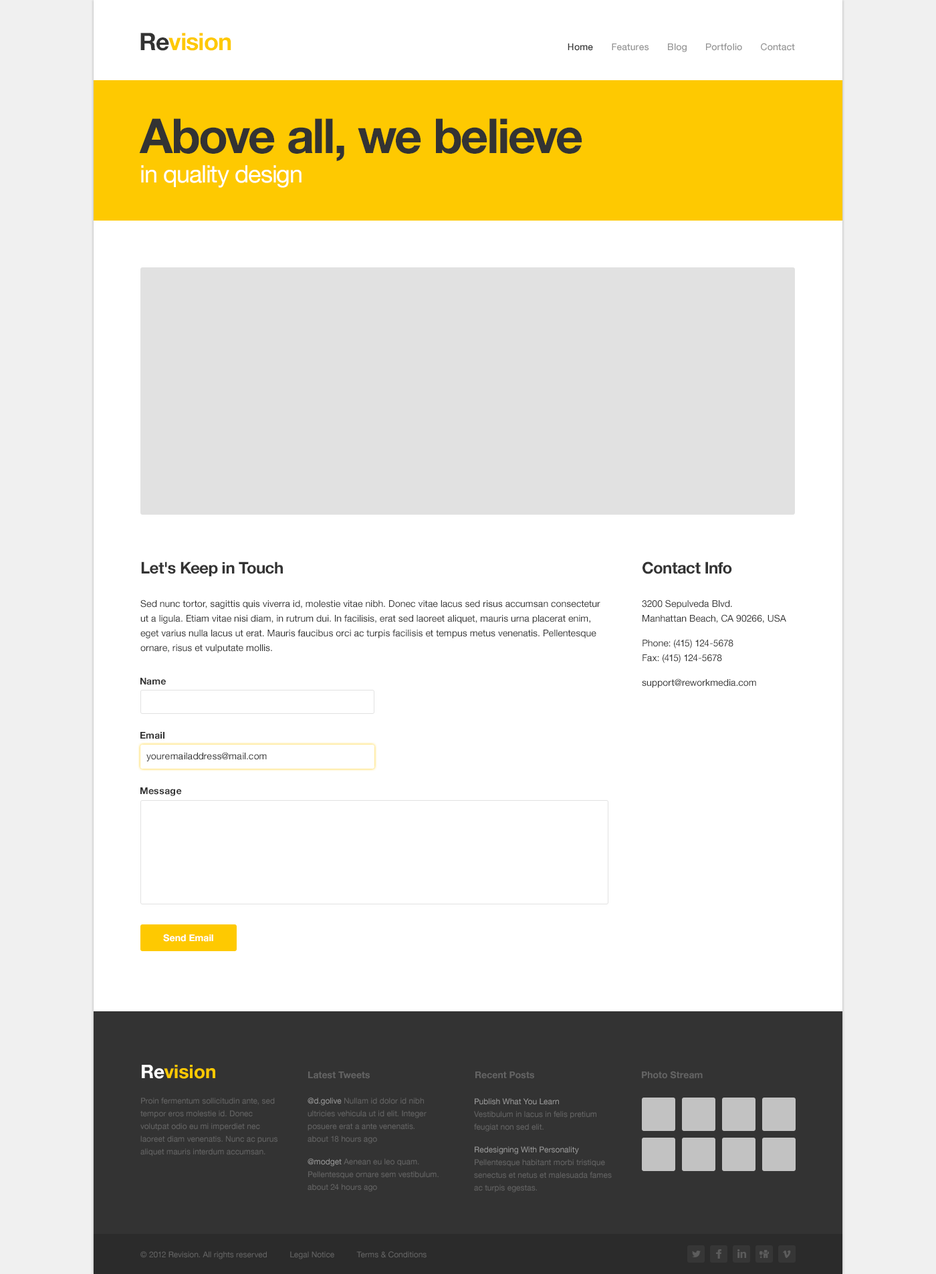
<style>
.page{position:relative;width:936px;height:1274px;background:#ffffff}
.page>*{position:absolute;margin:0}
.t1{font:24.1px "HelveticaNeue-Bold";letter-spacing:-0.025em;color:#fec901}
.t2{font:24.1px "HelveticaNeue-Bold";letter-spacing:-0.025em;color:#333333}
.t3{font:9.4px "HelveticaNeue-Medium";color:#959595}
.t4{font:9.4px "HelveticaNeue-Medium";color:#333333}
.t5{font:48.1px "HelveticaNeue-Bold";letter-spacing:-0.025em;color:#333333}
.t6{font:24.1px "HelveticaNeue";letter-spacing:-0.025em;color:#ffffff}
.t7{font:16px "HelveticaNeue-Bold";letter-spacing:-0.025em;color:#333333}
.t8{font:9.4px/14.7px "HelveticaNeue";color:#333333}
.t9{font:9.4px "HelveticaNeue-Bold";color:#333333}
.t10{font:9.4px "HelveticaNeue";color:#333333}
.t11{font:9.4px "HelveticaNeue-Bold";color:#ffffff}
.t12{font:18.7px "HelveticaNeue-Bold";color:#fec901}
.t13{font:18.7px "HelveticaNeue-Bold";color:#ffffff}
.t14{font:9.4px "HelveticaNeue-Bold";color:#636363}
.t15{font:8px/12.7px "HelveticaNeue";color:#636363}
.t16{font:8px/12.7px "HelveticaNeue";color:#959595}
.t17{font:8px "HelveticaNeue";color:#636363}
</style>
<div class="page">
<p class="t1" style="left:140px;top:33px;width:91px;height:18px"><span class="t2">Re</span>vision</p>
<p class="t3" style="left:568px;top:43px;width:227px;height:9px"><span class="t4">Home       </span>Features       Blog       Portfolio       Contact</p>
<p class="t5" style="left:139px;top:118px;width:443px;height:70px">Above all, we believe<br><span class="t6">in quality design</span></p>
<p class="t7" style="left:141px;top:562px;width:142px;height:15px">Let's Keep in Touch</p>
<p class="t7" style="left:642px;top:562px;width:90px;height:12px">Contact Info</p>
<p class="t8" style="left:140px;top:600px;width:460px;height:53px">Sed nunc tortor, sagittis quis viverra id, molestie vitae nibh. Donec vitae lacus sed risus accumsan consectetur ut a ligula. Etiam vitae nisi diam, in rutrum dui. In facilisis, erat sed laoreet aliquet, mauris urna placerat enim, eget varius nulla lacus ut erat. Mauris faucibus orci ac turpis facilisis et tempus metus venenatis. Pellentesque ornare, risus et vulputate mollis.</p>
<p class="t8" style="left:642px;top:600px;width:144px;height:88px">3200 Sepulveda Blvd.<br>Manhattan Beach, CA 90266, USA<br>Phone: (415) 124-5678<br>Fax: (415) 124-5678<br>support@reworkmedia.com</p>
<p class="t9" style="left:140px;top:678px;width:26px;height:7px">Name</p>
<p class="t9" style="left:140px;top:732px;width:24px;height:7px">Email</p>
<p class="t10" style="left:146px;top:752px;width:121px;height:9px">youremailaddress@mail.com</p>
<p class="t9" style="left:140px;top:787px;width:42px;height:9px">Message</p>
<p class="t11" style="left:163px;top:934px;width:50px;height:8px">Send Email</p>
<p class="t12" style="left:142px;top:1065px;width:73px;height:14px"><span class="t13">Re</span>vision</p>
<p class="t14" style="left:308px;top:1072px;width:62px;height:7px">Latest Tweets</p>
<p class="t14" style="left:475px;top:1072px;width:59px;height:7px">Recent Posts</p>
<p class="t14" style="left:642px;top:1071px;width:61px;height:8px">Photo Stream</p>
<p class="t15" style="left:140px;top:1098px;width:137px;height:58px">Proin fermentum sollicitudin ante, sed tempor eros molestie id. Donec volutpat odio eu mi imperdiet nec laoreet diam venenatis. Nunc ac purus aliquet mauris interdum accumsan.</p>
<p class="t15" style="left:308px;top:1098px;width:131px;height:94px"><span class="t16">@d.golive </span>Nullam id dolor id nibh ultricies vehicula ut id elit. Integer posuere erat a ante venenatis.<br>about 18 hours ago<br><span class="t16">@modget </span>Aenean eu leo quam. Pellentesque ornare sem vestibulum.<br>about 24 hours ago</p>
<p class="t15" style="left:474px;top:1098px;width:138px;height:95px"><span class="t16">Publish What You Learn<br></span>Vestibulum in lacus in felis pretium feugiat non sed elit.<br><span class="t16">Redesigning With Personality<br></span>Pellentesque habitant morbi tristique senectus et netus et malesuada fames ac turpis egestas.</p>
<p class="t17" style="left:140px;top:1251px;width:286px;height:8px">© 2012 Revision. All rights reserved          Legal Notice          Terms &amp; Conditions</p>
</div>
